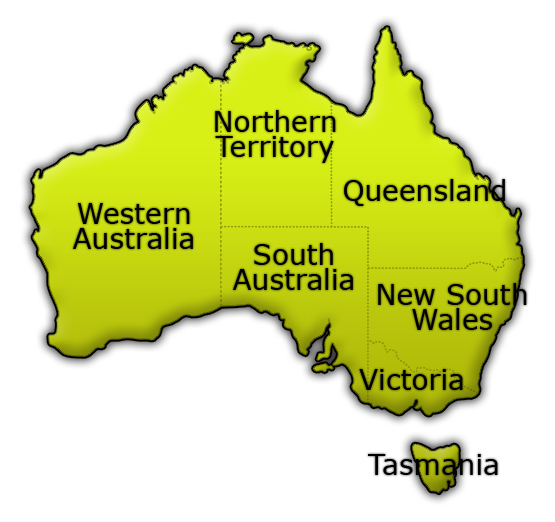
<style>
.page{position:relative;width:555px;height:522px;background:#ffffff}
.page>*{position:absolute;margin:0}
.t1{font:28px/25px "Verdana";color:#000000}
.t2{font:28px "Verdana";color:#000000}
.t3{font:28px "Verdana";color:#010101}
</style>
<div class="page">
<p class="t1" style="left:215px;top:110px;width:121px;height:53px;text-align:center">Northern<br>Territory</p>
<p class="t2" style="left:344px;top:179px;width:161px;height:27px">Queensland</p>
<p class="t1" style="left:73px;top:203px;width:120px;height:46px;text-align:center">Western<br>Australia</p>
<p class="t1" style="left:233px;top:243px;width:120px;height:47px;text-align:center">South<br>Australia</p>
<p class="t1" style="left:378px;top:283px;width:149px;height:47px;text-align:center">New South<br>Wales</p>
<p class="t2" style="left:359px;top:369px;width:104px;height:21px">Victoria</p>
<p class="t3" style="left:368px;top:454px;width:130px;height:21px">Tasmania</p>
</div>
